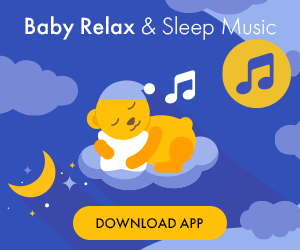
<style>
.page{position:relative;width:300px;height:250px;background:#3350b8}
.page>*{position:absolute;margin:0}
.t1{font:24.3px "FuturaLightC";color:#ffffff}
.t2{font:24.3px "FuturaMediumC";color:#ffffff}
.t3{font:14.5px "FuturaMediumC";color:#000000;text-transform:uppercase}
</style>
<div class="page">
<p class="t1" style="left:25px;top:16px;width:251px;height:24px"><span class="t2">Baby Relax </span>&amp; Sleep Music</p>
<p class="t3" style="left:96px;top:217px;width:107px;height:12px">download app</p>
</div>
